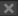
<style>
.page{position:relative;width:18px;height:16px;background:#414141}
.page>*{position:absolute;margin:0}
.t1{font:22px "Arial-BoldMT";letter-spacing:0.01em;color:#7f7f7f}
</style>
<div class="page">
<p class="t1" style="left:3px;top:3px;width:11px;height:11px">×</p>
</div>
